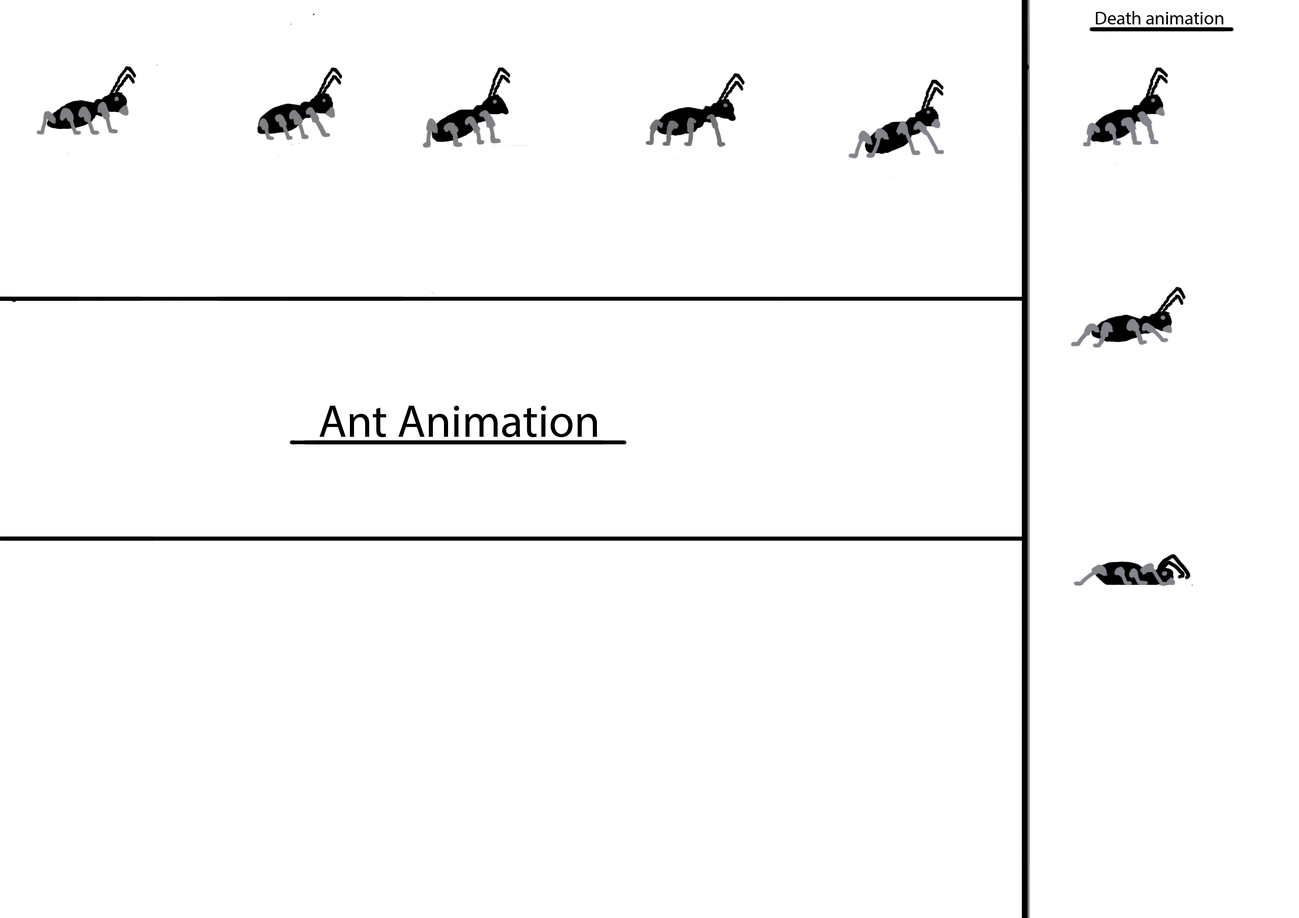
<style>
.page{position:relative;width:1299px;height:918px;background:#ffffff}
.page>*{position:absolute;margin:0}
.t1{font:4.4px "MyriadPro-Regular";color:#000000}
.t2{font:46.3px "MyriadPro-Regular";color:#000000}
</style>
<div class="page">
<p class="t1" style="left:1095px;top:11px;width:128px;height:13px">Death animation</p>
<p class="t2" style="left:320px;top:405px;width:277px;height:33px">Ant Animation</p>
</div>
